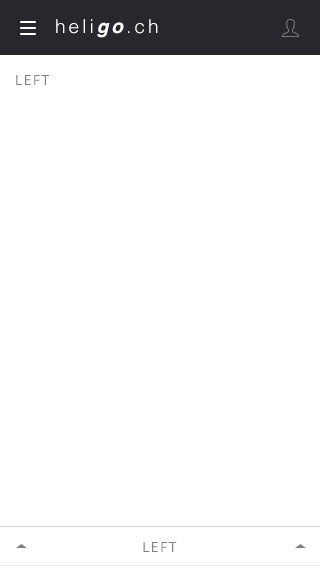
<style>
.page{position:relative;width:320px;height:566px;background:#ffffff}
.page>*{position:absolute;margin:0}
.t1{font:19px "Helvetica-Light";letter-spacing:0.16em;color:#ffffff}
.t2{font:19px "Helvetica-BoldOblique";letter-spacing:0.16em;color:#ffffff}
.t3{font:14px "OpenSans";letter-spacing:0.1em;color:#828282;text-transform:uppercase}
</style>
<div class="page">
<p class="t1" style="left:56px;top:19px;width:102px;height:19px">heli<span class="t2">go</span>.ch</p>
<p class="t3" style="left:16px;top:75px;width:33px;height:10px">left</p>
<p class="t3" style="left:143px;top:542px;width:34px;height:10px">left</p>
</div>
